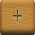
<style>
.page{position:relative;width:35px;height:35px}
.page>*{position:absolute;margin:0}
.t1{font:23px "MyriadPro-Regular";scale:0.7 1}
</style>
<div class="page">
<p class="t1" style="left:13px;top:9px;width:9px;height:13px">+</p>
</div>
